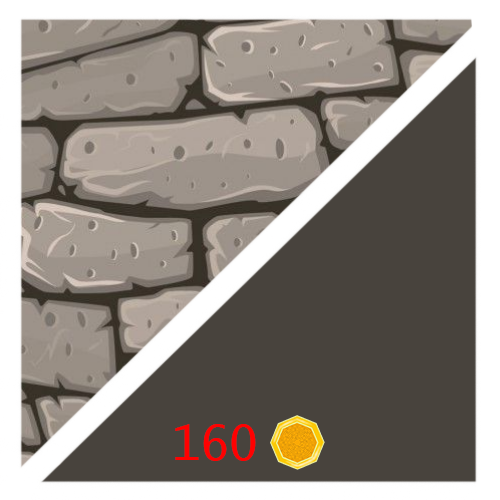
<style>
.page{position:relative;width:500px;height:500px;background:#48433d}
.page>*{position:absolute;margin:0}
.t1{font:48px "LucidaConsole";color:#ff0101}
</style>
<div class="page">
<p class="t1" style="left:175px;top:424px;width:81px;height:37px">160</p>
</div>
